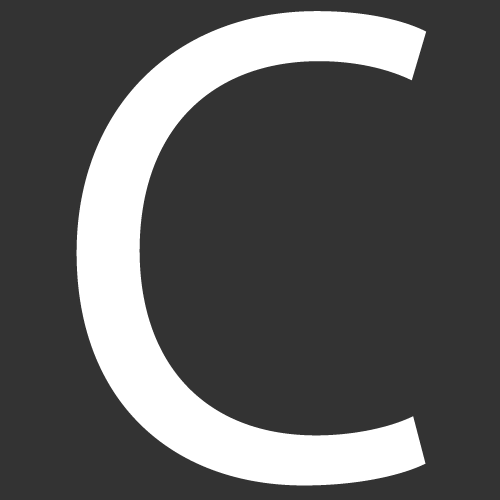
<style>
.page{position:relative;width:500px;height:500px;background:#333333}
.page>*{position:absolute;margin:0}
.t1{font:682.2px "MyriadPro-Regular";color:#ffffff}
</style>
<div class="page">
<p class="t1" style="left:76px;top:11px;width:351px;height:475px">C</p>
</div>
